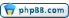
<style>
.page{position:relative;width:69px;height:18px;background:#ffffff}
.page>*{position:absolute;margin:0}
.t1{font:9px "TriplexLight";letter-spacing:0.025em;color:#006597;scale:1.11 1}
</style>
<div class="page">
<p class="t1" style="left:18px;top:6px;width:46px;height:9px">phpBB.com</p>
</div>
